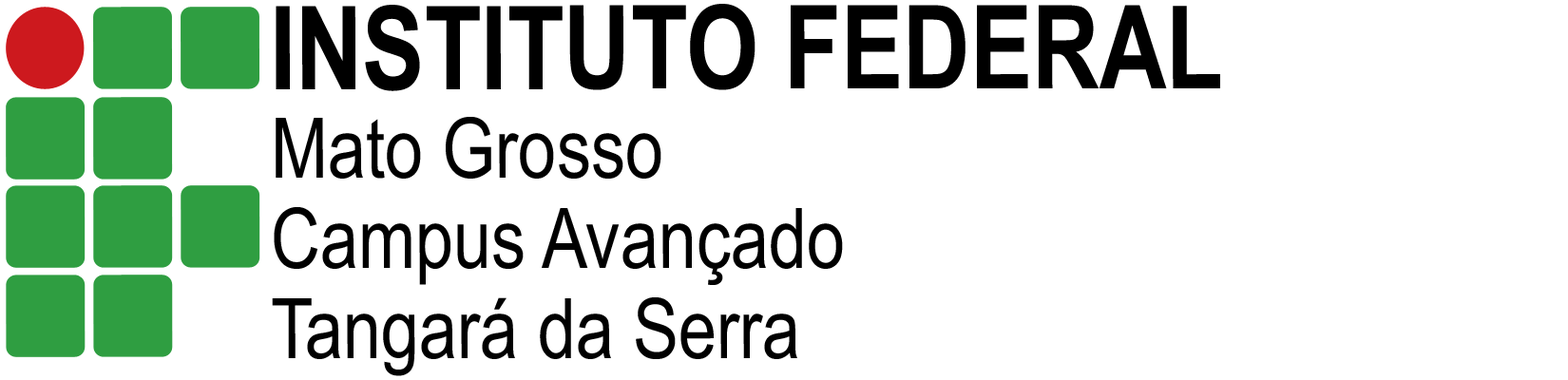
<style>
.page{position:relative;width:1568px;height:380px;background:#ffffff}
.page>*{position:absolute;margin:0}
.t1{font:115.9px "ArialNarrow-Bold";color:#000000}
.t2{font:83.6px "ArialNarrow";color:#000000}
</style>
<div class="page">
<p class="t1" style="left:276px;top:4px;width:944px;height:87px">INSTITUTO FEDERAL</p>
<p class="t2" style="left:276px;top:117px;width:385px;height:62px">Mato Grosso</p>
<p class="t2" style="left:274px;top:207px;width:569px;height:78px">Campus Avançado</p>
<p class="t2" style="left:272px;top:297px;width:525px;height:79px">Tangará da Serra</p>
</div>
